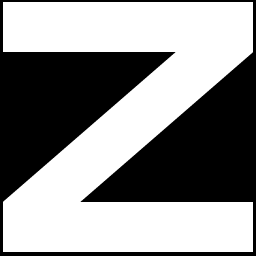
<style>
.page{position:relative;width:256px;height:256px;background:#ffffff}
.page>*{position:absolute;margin:0}
.t1{font:250px "Sloan";color:#ffffff}
</style>
<div class="page">
<p class="t1" style="left:3px;top:2px;width:250px;height:250px">Z</p>
</div>
